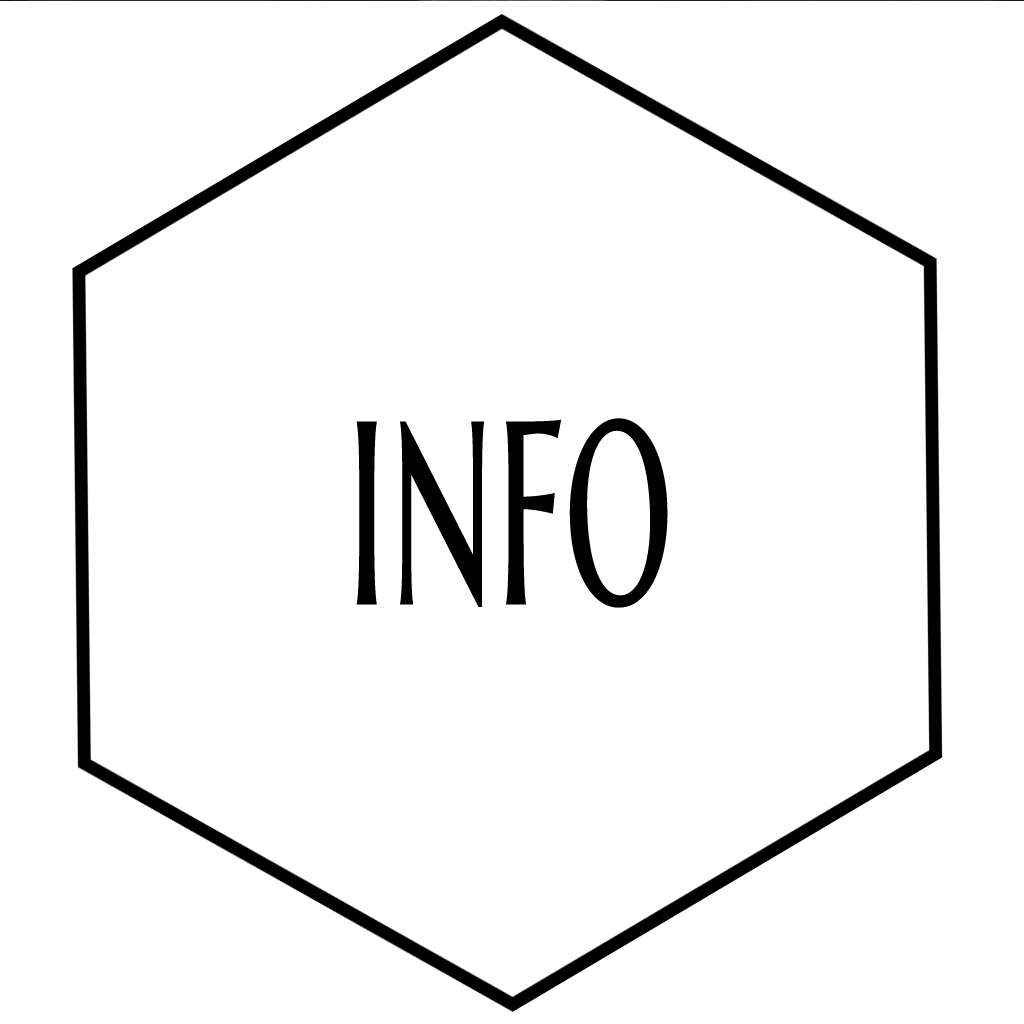
<style>
.page{position:relative;width:1024px;height:1024px;background:#ffffff}
.page>*{position:absolute;margin:0}
.t1{font:348.1px "MarcellusSC-Regular";color:#000000;scale:0.5 1}
</style>
<div class="page">
<p class="t1" style="left:356px;top:417px;width:312px;height:190px">info</p>
</div>
